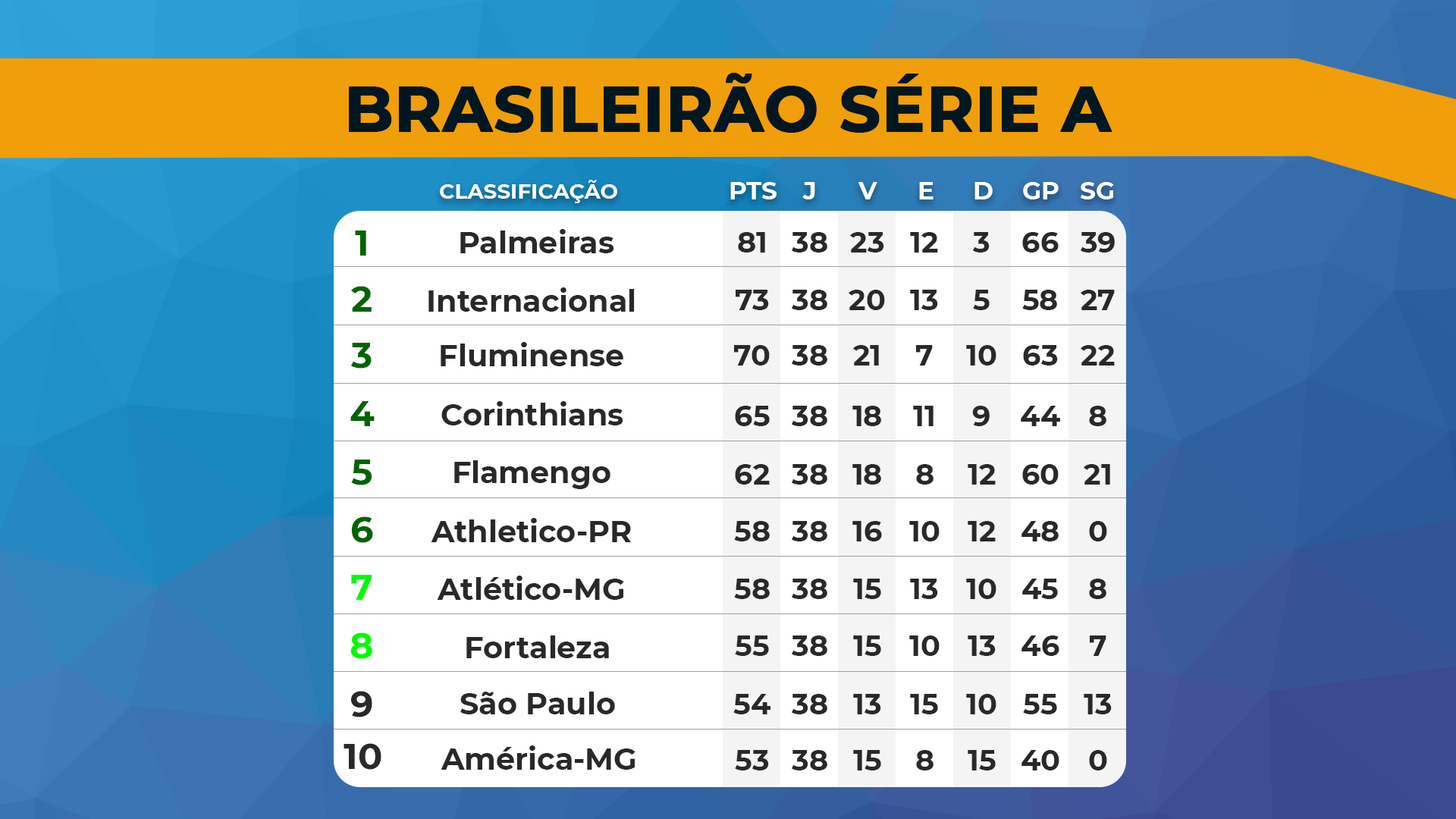
<style>
.page{position:relative;width:1456px;height:819px;background:#ffffff}
.page>*{position:absolute;margin:0}
.t1{font:63.7px "Montserrat-Bold";color:#001621;text-transform:uppercase;font-weight:bold}
.t2{font:21.1px "Montserrat-Bold";color:#ffffff}
.t3{font:24.8px "Montserrat-Bold";color:#ffffff}
.t4{font:36.2px "Montserrat-Bold";color:#006300}
.t5{font:30.1px "Montserrat-Bold";color:#292929}
.t6{font:28.9px "Montserrat-Bold";color:#292929}
.t7{font:36.2px "Montserrat-Bold";color:#006400}
.t8{font:36.2px "Montserrat-Bold";color:#00fa00}
.t9{font:36.2px "Montserrat-Bold";color:#292929}
</style>
<div class="page">
<p class="t1" style="left:349px;top:73px;width:763px;height:60px">BRASILEIRÃO SÉRIE A</p>
<p class="t2" style="left:440px;top:180px;width:177px;height:23px">CLASSIFICAÇÃO</p>
<p class="t3" style="left:730px;top:182px;width:47px;height:17px">PTS</p>
<p class="t3" style="left:802px;top:182px;width:13px;height:17px">J</p>
<p class="t3" style="left:858px;top:182px;width:19px;height:17px">V</p>
<p class="t3" style="left:919px;top:182px;width:14px;height:17px">E</p>
<p class="t3" style="left:974px;top:182px;width:19px;height:17px">D</p>
<p class="t3" style="left:1023px;top:182px;width:36px;height:17px">GP</p>
<p class="t3" style="left:1080px;top:182px;width:34px;height:17px">SG</p>
<p class="t4" style="left:355px;top:231px;width:11px;height:25px">1</p>
<p class="t5" style="left:460px;top:229px;width:154px;height:24px">Palmeiras</p>
<p class="t6" style="left:738px;top:232px;width:27px;height:21px">81</p>
<p class="t6" style="left:792px;top:232px;width:35px;height:21px">38</p>
<p class="t6" style="left:850px;top:232px;width:34px;height:21px">23</p>
<p class="t6" style="left:910px;top:232px;width:28px;height:21px">12</p>
<p class="t6" style="left:973px;top:232px;width:17px;height:21px">3</p>
<p class="t6" style="left:1022px;top:232px;width:37px;height:21px">66</p>
<p class="t6" style="left:1081px;top:232px;width:34px;height:21px">39</p>
<p class="t7" style="left:351px;top:286px;width:21px;height:26px">2</p>
<p class="t5" style="left:428px;top:287px;width:207px;height:25px">Internacional</p>
<p class="t6" style="left:736px;top:290px;width:33px;height:20px">73</p>
<p class="t6" style="left:792px;top:290px;width:35px;height:20px">38</p>
<p class="t6" style="left:849px;top:290px;width:36px;height:20px">20</p>
<p class="t6" style="left:910px;top:290px;width:28px;height:20px">13</p>
<p class="t6" style="left:973px;top:290px;width:17px;height:20px">5</p>
<p class="t6" style="left:1022px;top:290px;width:35px;height:20px">58</p>
<p class="t6" style="left:1081px;top:290px;width:34px;height:20px">27</p>
<p class="t7" style="left:351px;top:343px;width:21px;height:26px">3</p>
<p class="t5" style="left:441px;top:342px;width:182px;height:24px">Fluminense</p>
<p class="t6" style="left:734px;top:345px;width:36px;height:21px">70</p>
<p class="t6" style="left:792px;top:345px;width:35px;height:21px">38</p>
<p class="t6" style="left:853px;top:345px;width:26px;height:21px">21</p>
<p class="t6" style="left:916px;top:345px;width:17px;height:21px">7</p>
<p class="t6" style="left:966px;top:345px;width:30px;height:21px">10</p>
<p class="t6" style="left:1023px;top:345px;width:35px;height:21px">63</p>
<p class="t6" style="left:1081px;top:345px;width:34px;height:21px">22</p>
<p class="t7" style="left:350px;top:401px;width:25px;height:25px">4</p>
<p class="t5" style="left:441px;top:401px;width:182px;height:24px">Corinthians</p>
<p class="t6" style="left:735px;top:406px;width:35px;height:20px">65</p>
<p class="t6" style="left:792px;top:406px;width:35px;height:20px">38</p>
<p class="t6" style="left:852px;top:406px;width:29px;height:20px">18</p>
<p class="t6" style="left:913px;top:406px;width:20px;height:20px">11</p>
<p class="t6" style="left:972px;top:406px;width:18px;height:20px">9</p>
<p class="t6" style="left:1021px;top:406px;width:39px;height:20px">44</p>
<p class="t6" style="left:1089px;top:406px;width:17px;height:20px">8</p>
<p class="t7" style="left:351px;top:460px;width:21px;height:25px">5</p>
<p class="t5" style="left:454px;top:460px;width:156px;height:29px">Flamengo</p>
<p class="t6" style="left:735px;top:464px;width:35px;height:21px">62</p>
<p class="t6" style="left:792px;top:464px;width:35px;height:21px">38</p>
<p class="t6" style="left:852px;top:464px;width:29px;height:21px">18</p>
<p class="t6" style="left:916px;top:464px;width:17px;height:21px">8</p>
<p class="t6" style="left:968px;top:464px;width:28px;height:21px">12</p>
<p class="t6" style="left:1022px;top:464px;width:37px;height:21px">60</p>
<p class="t6" style="left:1084px;top:464px;width:26px;height:21px">21</p>
<p class="t7" style="left:351px;top:516px;width:22px;height:27px">6</p>
<p class="t5" style="left:431px;top:518px;width:200px;height:24px">Athletico-PR</p>
<p class="t6" style="left:734px;top:521px;width:36px;height:20px">58</p>
<p class="t6" style="left:792px;top:521px;width:35px;height:20px">38</p>
<p class="t6" style="left:852px;top:521px;width:30px;height:20px">16</p>
<p class="t6" style="left:909px;top:521px;width:31px;height:20px">10</p>
<p class="t6" style="left:968px;top:521px;width:28px;height:20px">12</p>
<p class="t6" style="left:1021px;top:521px;width:38px;height:20px">48</p>
<p class="t6" style="left:1089px;top:521px;width:18px;height:20px">0</p>
<p class="t8" style="left:351px;top:575px;width:21px;height:25px">7</p>
<p class="t5" style="left:437px;top:576px;width:187px;height:24px">Atlético-MG</p>
<p class="t6" style="left:734px;top:579px;width:36px;height:20px">58</p>
<p class="t6" style="left:792px;top:579px;width:35px;height:20px">38</p>
<p class="t6" style="left:853px;top:579px;width:28px;height:20px">15</p>
<p class="t6" style="left:910px;top:579px;width:28px;height:20px">13</p>
<p class="t6" style="left:966px;top:579px;width:30px;height:20px">10</p>
<p class="t6" style="left:1022px;top:579px;width:36px;height:20px">45</p>
<p class="t6" style="left:1089px;top:579px;width:17px;height:20px">8</p>
<p class="t8" style="left:350px;top:632px;width:22px;height:27px">8</p>
<p class="t5" style="left:466px;top:635px;width:143px;height:23px">Fortaleza</p>
<p class="t6" style="left:735px;top:635px;width:34px;height:21px">55</p>
<p class="t6" style="left:792px;top:635px;width:35px;height:21px">38</p>
<p class="t6" style="left:853px;top:635px;width:28px;height:21px">15</p>
<p class="t6" style="left:909px;top:635px;width:31px;height:21px">10</p>
<p class="t6" style="left:968px;top:635px;width:28px;height:21px">13</p>
<p class="t6" style="left:1021px;top:635px;width:38px;height:21px">46</p>
<p class="t6" style="left:1090px;top:635px;width:16px;height:21px">7</p>
<p class="t9" style="left:351px;top:691px;width:21px;height:26px">9</p>
<p class="t5" style="left:460px;top:692px;width:155px;height:22px">São Paulo</p>
<p class="t6" style="left:733px;top:694px;width:37px;height:20px">54</p>
<p class="t6" style="left:792px;top:694px;width:35px;height:20px">38</p>
<p class="t6" style="left:853px;top:694px;width:28px;height:20px">13</p>
<p class="t6" style="left:910px;top:694px;width:28px;height:20px">15</p>
<p class="t6" style="left:966px;top:694px;width:30px;height:20px">10</p>
<p class="t6" style="left:1023px;top:694px;width:34px;height:20px">55</p>
<p class="t6" style="left:1084px;top:694px;width:28px;height:20px">13</p>
<p class="t9" style="left:344px;top:743px;width:37px;height:27px">10</p>
<p class="t5" style="left:441px;top:745px;width:194px;height:25px">América-MG</p>
<p class="t6" style="left:735px;top:750px;width:34px;height:20px">53</p>
<p class="t6" style="left:792px;top:750px;width:35px;height:20px">38</p>
<p class="t6" style="left:853px;top:750px;width:28px;height:20px">15</p>
<p class="t6" style="left:916px;top:750px;width:17px;height:20px">8</p>
<p class="t6" style="left:968px;top:750px;width:28px;height:20px">15</p>
<p class="t6" style="left:1021px;top:750px;width:38px;height:20px">40</p>
<p class="t6" style="left:1089px;top:750px;width:18px;height:20px">0</p>
</div>
